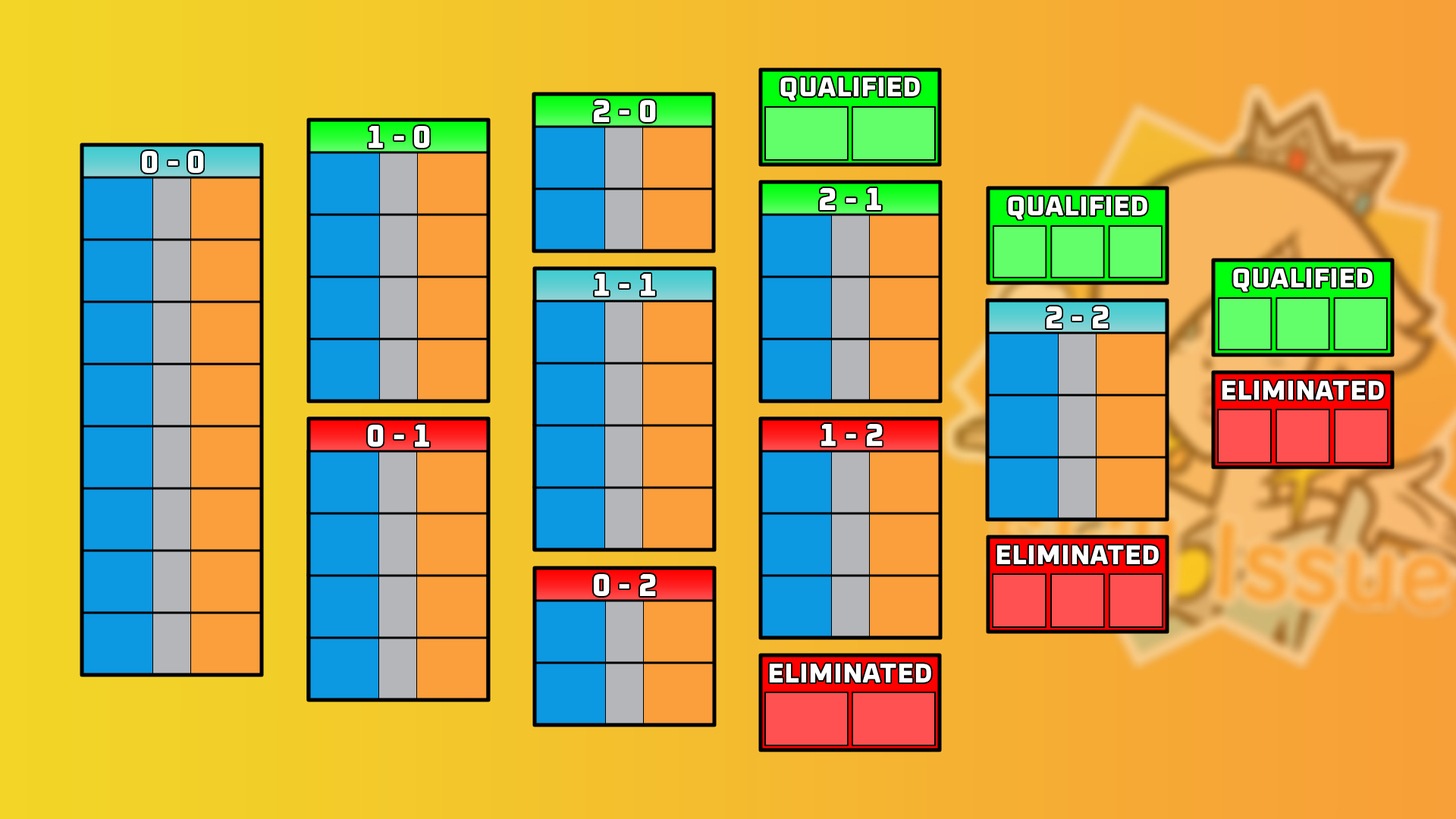
<style>
.page{position:relative;width:1456px;height:819px}
.page>*{position:absolute;margin:0}
.t1{font:27.3px "OxaniumRoman-ExtraBold";color:#ffffff}
.t2{font:31.8px "OxaniumRoman-ExtraBold";color:#ffffff}
</style>
<div class="page">
<p class="t1" style="left:780px;top:77px;width:140px;height:24px">QUALIFIED</p>
<p class="t2" style="left:593px;top:100px;width:63px;height:22px">2 - 0</p>
<p class="t2" style="left:369px;top:126px;width:61px;height:22px">1 - 0</p>
<p class="t2" style="left:141px;top:151px;width:63px;height:22px">0 - 0</p>
<p class="t2" style="left:819px;top:188px;width:62px;height:22px">2 - 1</p>
<p class="t1" style="left:1008px;top:196px;width:139px;height:24px">QUALIFIED</p>
<p class="t1" style="left:1233px;top:268px;width:140px;height:24px">QUALIFIED</p>
<p class="t2" style="left:595px;top:274px;width:60px;height:22px">1 - 1</p>
<p class="t2" style="left:1046px;top:306px;width:63px;height:22px">2 - 2</p>
<p class="t1" style="left:1222px;top:381px;width:162px;height:19px">ELIMINATED</p>
<p class="t2" style="left:367px;top:425px;width:62px;height:22px">0 - 1</p>
<p class="t2" style="left:821px;top:424px;width:62px;height:22px">1 - 2</p>
<p class="t1" style="left:996px;top:545px;width:163px;height:19px">ELIMINATED</p>
<p class="t2" style="left:593px;top:574px;width:63px;height:22px">0 - 2</p>
<p class="t1" style="left:769px;top:664px;width:162px;height:18px">ELIMINATED</p>
</div>
